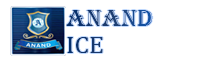
<style>
.page{position:relative;width:200px;height:60px;background:#ffffff}
.page>*{position:absolute;margin:0}
.t1{font:24.1px/26.5px "Algerian";color:#15396d;scale:1.09 1}
.t2{font:24.1px/26.5px "Cambria";color:#15396d;scale:1.09 1}
</style>
<div class="page">
<p class="t1" style="left:66px;top:10px;width:87px;height:43px;text-align:right">Anand<br><span class="t2">ICE</span></p>
</div>
